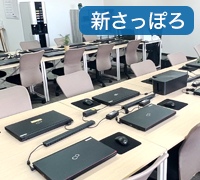
<style>
.page{position:relative;width:200px;height:180px}
.page>*{position:absolute;margin:0}
.t1{font:20px "HiraKakuStd-W5";letter-spacing:-0.05em;color:#ffffff}
</style>
<div class="page">
<p class="t1" style="left:91px;top:11px;width:93px;height:19px">新さっぽろ</p>
</div>
